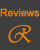
<style>
.page{position:relative;width:40px;height:50px;background:#3e3e3e}
.page>*{position:absolute;margin:0}
.t1{font:10.4px "ArialMT";color:#f08302}
.t2{font:25px "Vivaldii";color:#f08302;scale:0.86 1}
</style>
<div class="page">
<p class="t1" style="left:0px;top:8px;width:40px;height:9px">Reviews</p>
<p class="t2" style="left:8px;top:25px;width:23px;height:18px">R</p>
</div>
